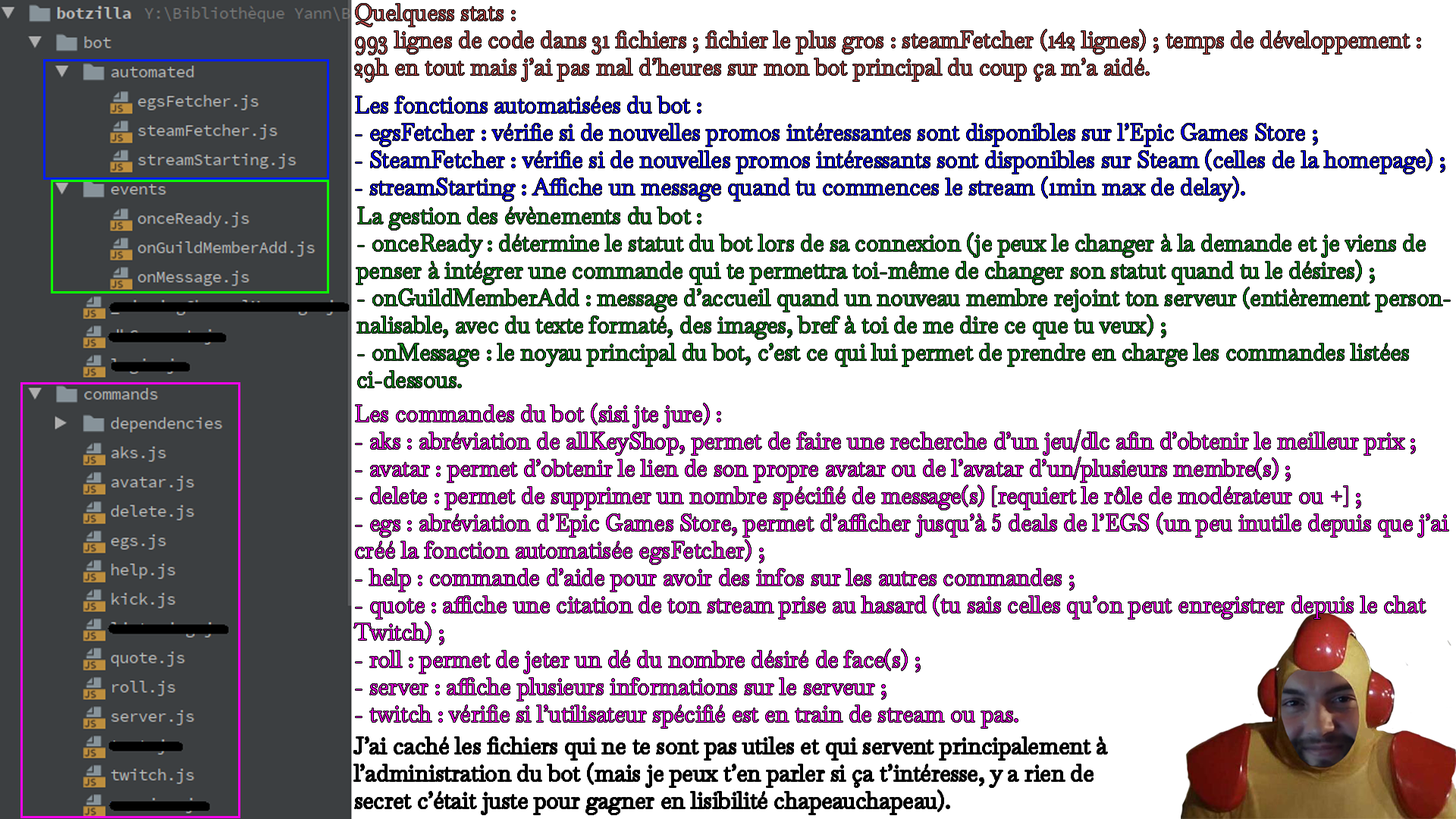
<style>
.page{position:relative;width:1456px;height:819px;background:#ffffff}
.page>*{position:absolute;margin:0}
.t1{font:22.7px "Baskervville-Regular";color:#b04444}
.t2{font:22.7px "Baskervville-Regular";color:#0600ff}
.t3{font:22.7px "Baskervville-Regular";color:#0d8518}
.t4{font:22.7px "Baskervville-Regular";color:#fa00eb}
.t5{font:22.7px "Baskervville-Regular";color:#000000}
</style>
<div class="page">
<p class="t1" style="left:355px;top:4px;width:1065px;height:78px">Quelquess stats :<br>993 lignes de code dans 31 fichiers ; fichier le plus gros : steamFetcher (142 lignes) ; temps de développement : 29h en tout mais j’ai pas mal d’heures sur mon bot principal du coup ça m’a aidé.</p>
<p class="t2" style="left:356px;top:96px;width:1089px;height:105px">Les fonctions automatisées du bot :<br>- egsFetcher : vérifie si de nouvelles promos intéressantes sont disponibles sur l’Epic Games Store ;<br>- SteamFetcher : vérifie si de nouvelles promos intéressants sont disponibles sur Steam (celles de la homepage) ;<br>- streamStarting : Affiche un message quand tu commences le stream (1min max de delay).</p>
<p class="t3" style="left:356px;top:207px;width:1094px;height:181px">La gestion des évènements du bot :<br>- onceReady : détermine le statut du bot lors de sa connexion (je peux le changer à la demande et je viens de penser à intégrer une commande qui te permettra toi-même de changer son statut quand tu le désires) ;<br>- onGuildMemberAdd : message d’accueil quand un nouveau membre rejoint ton serveur (entièrement personnalisable, avec du texte formaté, des images, bref à toi de me dire ce que tu veux) ;<br>- onMessage : le noyau principal du bot, c’est ce qui lui permet de prendre en charge les commandes listées ci-dessous.</p>
<p class="t4" style="left:354px;top:403px;width:1094px;height:325px">Les commandes du bot (sisi jte jure) :<br>- aks : abréviation de allKeyShop, permet de faire une recherche d’un jeu/dlc afin d’obtenir le meilleur prix ;<br>- avatar : permet d’obtenir le lien de son propre avatar ou de l’avatar d’un/plusieurs membre(s) ;<br>- delete : permet de supprimer un nombre spécifié de message(s) [requiert le rôle de modérateur ou +] ;<br>- egs : abréviation d’Epic Games Store, permet d’afficher jusqu’à 5 deals de l’EGS (un peu inutile depuis que j’ai créé la fonction automatisée egsFetcher) ;<br>- help : commande d’aide pour avoir des infos sur les autres commandes ;<br>- quote : affiche une citation de ton stream prise au hasard (tu sais celles qu’on peut enregistrer depuis le chat Twitch) ;<br>- roll : permet de jeter un dé du nombre désiré de face(s) ;<br>- server : affiche plusieurs informations sur le serveur ;<br>- twitch : vérifie si l’utilisateur spécifié est en train de stream ou pas.</p>
<p class="t5" style="left:354px;top:737px;width:753px;height:77px">J’ai caché les fichiers qui ne te sont pas utiles et qui servent principalement à l’administration du bot (mais je peux t’en parler si ça t’intéresse, y a rien de secret c’était juste pour gagner en lisibilité chapeauchapeau).</p>
</div>
